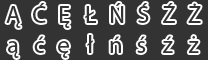
<style>
.page{position:relative;width:208px;height:60px;background:#333333}
.page>*{position:absolute;margin:0}
.t1{font:24px "MyriadPro-Regular";color:#333333}
.t2{font:24px "FrutigerLTStd-Roman";color:#333333}
</style>
<div class="page">
<p class="t1" style="left:6px;top:6px;width:15px;height:22px">Ą</p>
<p class="t1" style="left:33px;top:3px;width:13px;height:20px">Ć</p>
<p class="t1" style="left:60px;top:6px;width:10px;height:22px">Ę</p>
<p class="t2" style="left:85px;top:6px;width:11px;height:17px">Ł</p>
<p class="t1" style="left:111px;top:3px;width:13px;height:20px">Ń</p>
<p class="t1" style="left:138px;top:3px;width:11px;height:20px">Ś</p>
<p class="t1" style="left:163px;top:3px;width:12px;height:20px">Ź</p>
<p class="t1" style="left:188px;top:3px;width:13px;height:20px">Ż</p>
<p class="t1" style="left:8px;top:41px;width:11px;height:17px">ą</p>
<p class="t1" style="left:34px;top:36px;width:10px;height:17px">ć</p>
<p class="t1" style="left:58px;top:41px;width:11px;height:17px">ę</p>
<p class="t2" style="left:87px;top:35px;width:6px;height:18px">ł</p>
<p class="t1" style="left:110px;top:36px;width:11px;height:17px">ń</p>
<p class="t1" style="left:137px;top:36px;width:9px;height:17px">ś</p>
<p class="t1" style="left:163px;top:36px;width:10px;height:17px">ź</p>
<p class="t1" style="left:188px;top:36px;width:11px;height:17px">ż</p>
</div>
